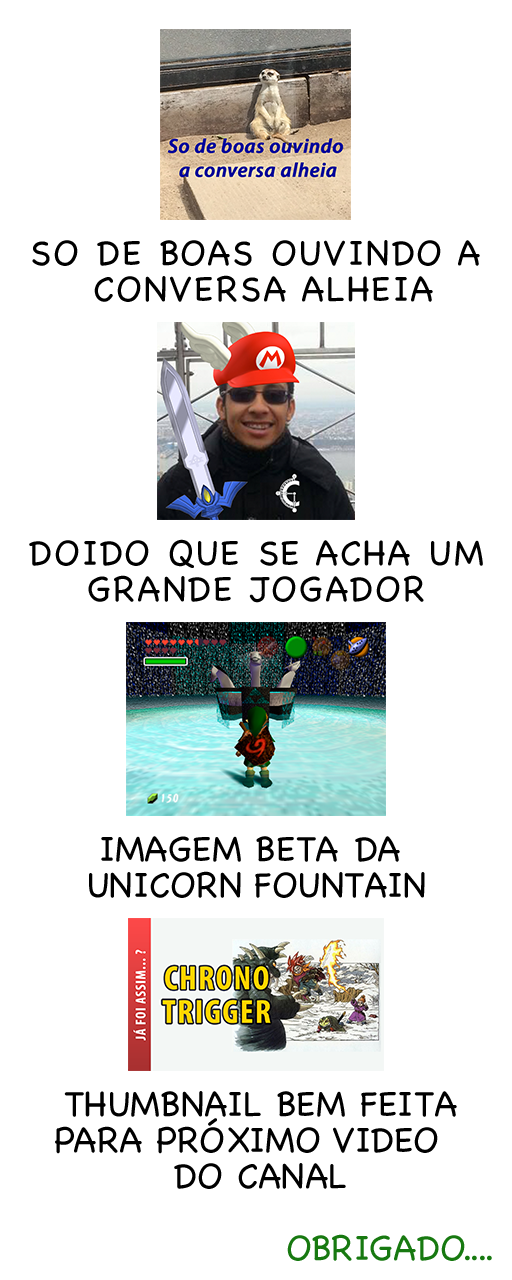
<style>
.page{position:relative;width:512px;height:1280px;background:#ffffff}
.page>*{position:absolute;margin:0}
.t1{font:36px/36px "Chalkboard";letter-spacing:0.05em;color:#000000;text-transform:uppercase}
.t2{font:36px/36px "Chalkboard";color:#000000;text-transform:uppercase}
.t3{font:36px "Chalkboard";color:#177910;text-transform:uppercase}
</style>
<div class="page">
<p class="t1" style="left:32px;top:240px;width:448px;height:62px;text-align:center">So de boas ouvindo a <br>conversa alheia</p>
<p class="t1" style="left:29px;top:539px;width:454px;height:64px;text-align:center">Doido que se acha um<br>grande jogador</p>
<p class="t2" style="left:89px;top:836px;width:336px;height:62px;text-align:center">Imagem Beta da <br>unicorn fountain</p>
<p class="t2" style="left:55px;top:1091px;width:402px;height:98px;text-align:center">THUMBNAIL BEM FEITA<br>PARA PRÓXIMO VIDEO  <br>DO CANAL</p>
<p class="t3" style="left:287px;top:1234px;width:205px;height:27px">Obrigado....</p>
</div>
